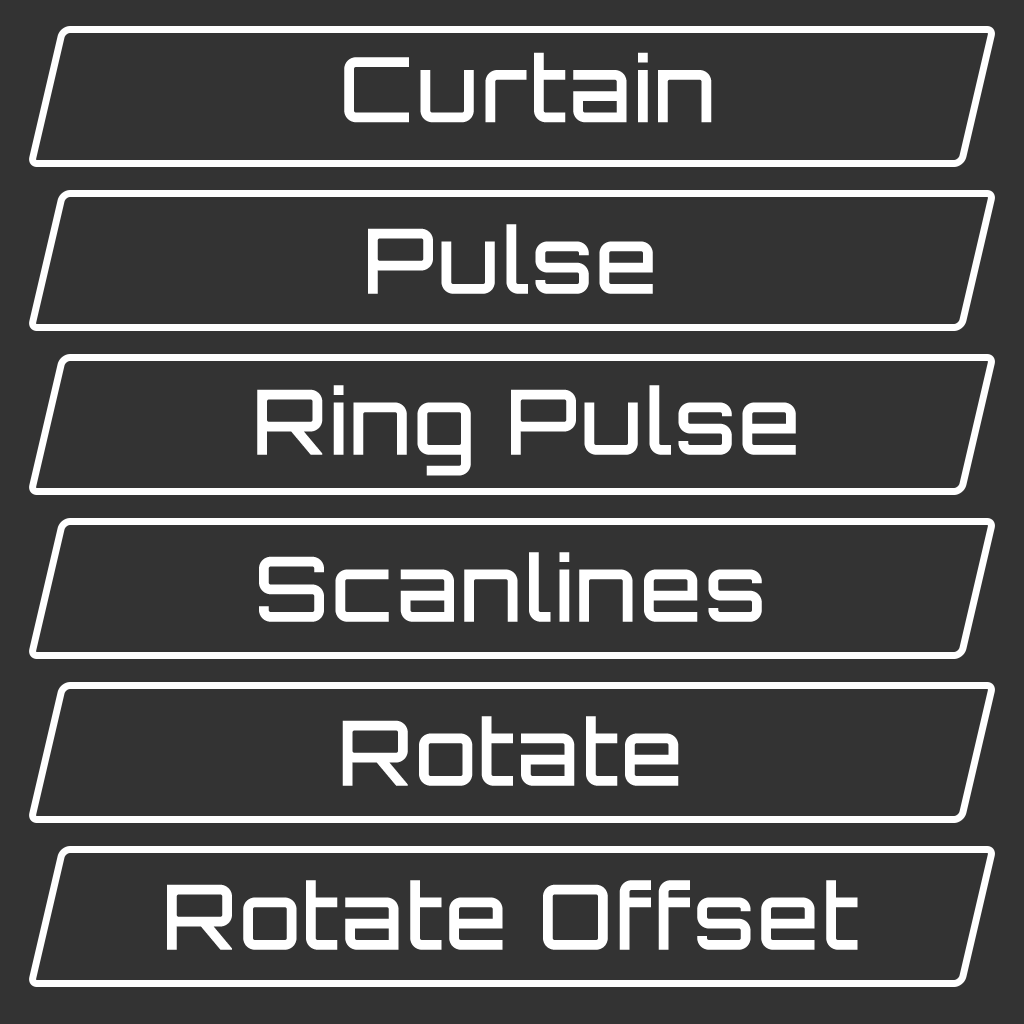
<style>
.page{position:relative;width:1024px;height:1024px;background:#333333}
.page>*{position:absolute;margin:0}
.t1{font:90.3px "Orbitron-Medium";letter-spacing:0.025em;color:#ffffff}
</style>
<div class="page">
<p class="t1" style="left:344px;top:52px;width:368px;height:71px">Curtain</p>
<p class="t1" style="left:368px;top:224px;width:285px;height:70px">Pulse</p>
<p class="t1" style="left:257px;top:385px;width:539px;height:91px">Ring Pulse</p>
<p class="t1" style="left:259px;top:552px;width:503px;height:70px">Scanlines</p>
<p class="t1" style="left:342px;top:716px;width:337px;height:70px">Rotate</p>
<p class="t1" style="left:167px;top:880px;width:691px;height:70px">Rotate Offset</p>
</div>
